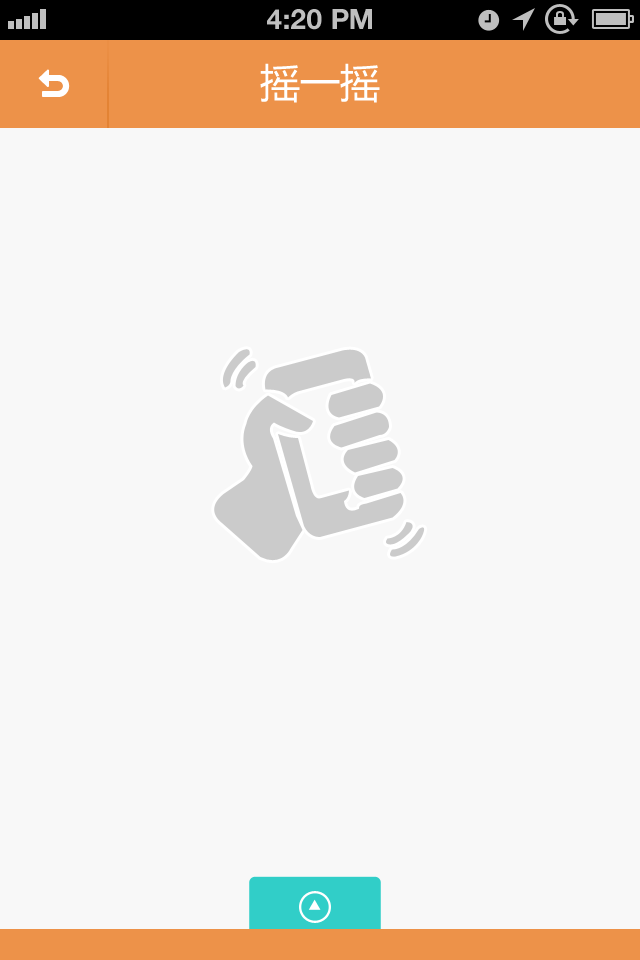
<style>
.page{position:relative;width:640px;height:960px;background:#f8f8f8}
.page>*{position:absolute;margin:0}
.t1{font:28px "HelveticaNeue-Bold";color:#bfbfbf;text-transform:uppercase}
.t2{font:40px "MicrosoftYaHei";color:#ffffff}
</style>
<div class="page">
<p class="t1" style="left:267px;top:9px;width:105px;height:21px">4:20 PM</p>
<p class="t2" style="left:260px;top:63px;width:120px;height:40px">摇一摇</p>
</div>
